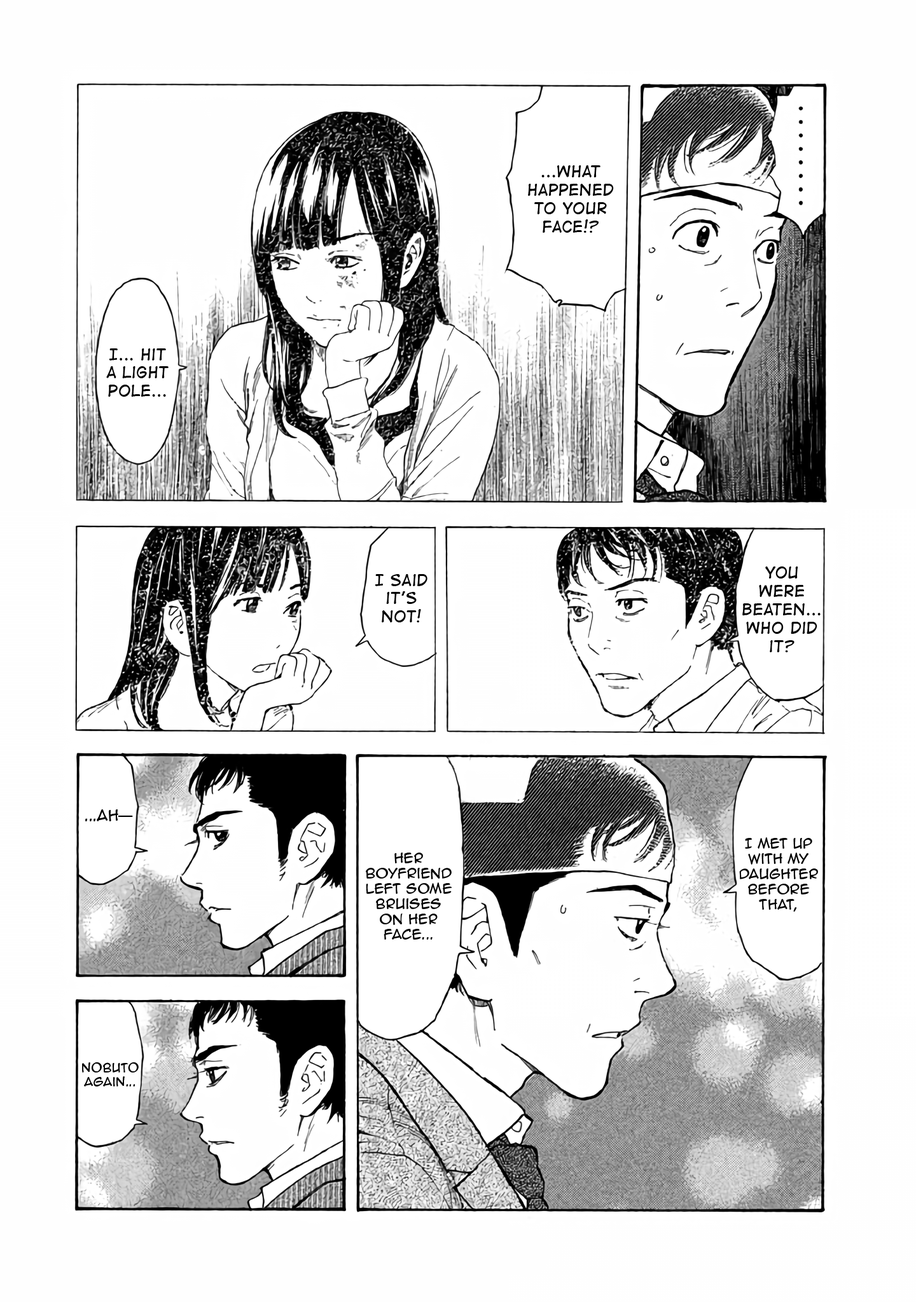
<style>
.page{position:relative;width:916px;height:1302px;background:#fefefe}
.page>*{position:absolute;margin:0}
.t1{font:15.3px "DigitalStrip";color:#000000}
.t2{font:14px "AnimeAce2.0BB";color:#000000}
.t3{font:14px "AdobeHeitiStd-Regular";color:#000000}
.t4{font:12.7px "AnimeAce2.0BB";color:#000000}
.t5{font:11.4px "AnimeAce2.0BB";color:#000000}
</style>
<div class="page">
<p class="t1" style="left:528px;top:165px;width:86px;height:68px;text-align:center">...What happened to your face!?</p>
<p class="t1" style="left:106px;top:348px;width:63px;height:49px;text-align:center">I... hit a light pole...</p>
<p class="t1" style="left:742px;top:567px;width:78px;height:85px;text-align:center">You <br>were beaten... Who did it?</p>
<p class="t1" style="left:375px;top:574px;width:52px;height:49px;text-align:center">I said it’s not!</p>
<p class="t2" style="left:85px;top:809px;width:48px;height:13px">...Ah<span class="t3">━</span></p>
<p class="t4" style="left:739px;top:837px;width:79px;height:75px;text-align:center">I met up with my daughter before that,</p>
<p class="t4" style="left:366px;top:853px;width:86px;height:87px;text-align:center">her boyfriend left some bruises <br>on her face...</p>
<p class="t5" style="left:82px;top:1063px;width:57px;height:24px;text-align:center">Nobuto again...</p>
</div>
